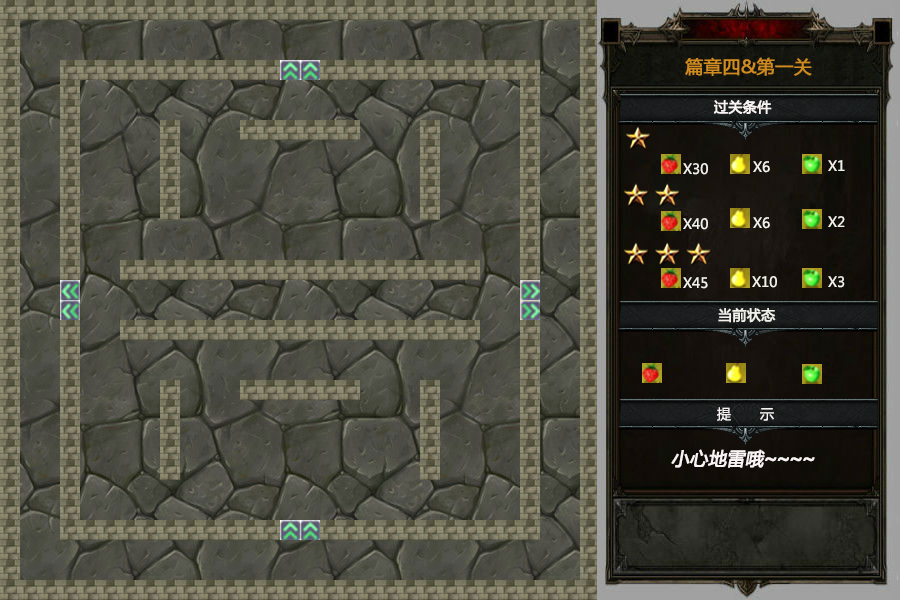
<style>
.page{position:relative;width:900px;height:600px}
.page>*{position:absolute;margin:0}
.t1{font:18px "MicrosoftYaHei";color:#cf8b20;font-weight:bold}
.t2{font:14px "MicrosoftYaHei";color:#f9f3f3;font-weight:bold}
.t3{font:14px "MicrosoftYaHei";color:#f1f0e9}
.t4{font:14px "MicrosoftYaHei";color:#f1f0e9;font-weight:bold}
.t5{font:14px "MicrosoftYaHei";color:#f9f3f3}
.t6{font:18px "MicrosoftYaHei";color:#f9f3f3;font-weight:bold;font-style:italic}
.t7{font:18px "AdobeHeitiStd-Regular";color:#f9f3f3;font-weight:bold;font-style:italic}
</style>
<div class="page">
<p class="t1" style="left:685px;top:57px;width:127px;height:19px">篇章四&amp;第一关</p>
<p class="t2" style="left:714px;top:100px;width:58px;height:15px">过关条件</p>
<p class="t3" style="left:753px;top:161px;width:17px;height:12px">X6</p>
<p class="t3" style="left:828px;top:160px;width:17px;height:11px">X1</p>
<p class="t3" style="left:683px;top:163px;width:25px;height:12px">X30</p>
<p class="t3" style="left:683px;top:218px;width:25px;height:12px">X40</p>
<p class="t3" style="left:753px;top:217px;width:17px;height:12px">X6</p>
<p class="t3" style="left:828px;top:216px;width:17px;height:11px">X2</p>
<p class="t3" style="left:683px;top:277px;width:25px;height:12px">X45</p>
<p class="t3" style="left:752px;top:276px;width:25px;height:12px">X10</p>
<p class="t3" style="left:828px;top:276px;width:17px;height:12px">X3</p>
<p class="t4" style="left:718px;top:308px;width:58px;height:15px">当前状态</p>
<p class="t5" style="left:717px;top:407px;width:57px;height:14px">提       示</p>
<p class="t6" style="left:671px;top:449px;width:144px;height:19px">小心地雷哦<span class="t7">~~~~</span></p>
</div>
